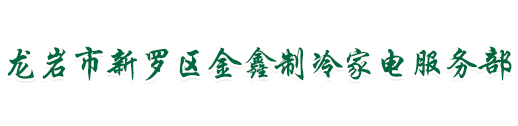
<style>
.page{position:relative;width:518px;height:126px;background:#ffffff}
.page>*{position:absolute;margin:0}
.t1{font:36px "STXingkai";letter-spacing:-0.06em;color:#00683e}
</style>
<div class="page">
<p class="t1" style="left:7px;top:46px;width:505px;height:35px">龙岩市新罗区金鑫制冷家电服务部</p>
</div>
